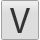
<style>
.page{position:relative;width:40px;height:40px;background:#dddddd}
.page>*{position:absolute;margin:0}
.t1{font:36px "MyriadPro-Regular";color:#333333}
</style>
<div class="page">
<p class="t1" style="left:10px;top:8px;width:20px;height:25px">V</p>
</div>
